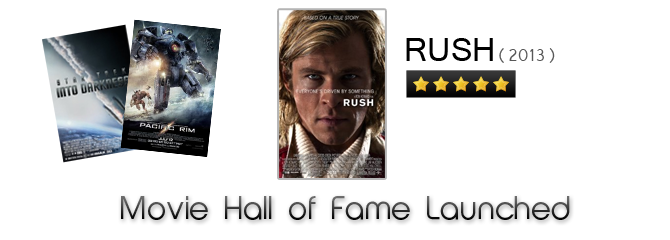
<style>
.page{position:relative;width:670px;height:240px;background:#ffffff}
.page>*{position:absolute;margin:0}
.t1{font:18px "Vrinda";color:#585858}
.t2{font:36px "Vrinda";color:#000000}
.t3{font:30px "AbeatbyKai"}
</style>
<div class="page">
<p class="t1" style="left:406px;top:38px;width:149px;height:25px"><span class="t2">RUSH</span>(2013)</p>
<p class="t3" style="left:121px;top:196px;width:449px;height:24px">Movie Hall of Fame Launched</p>
</div>
